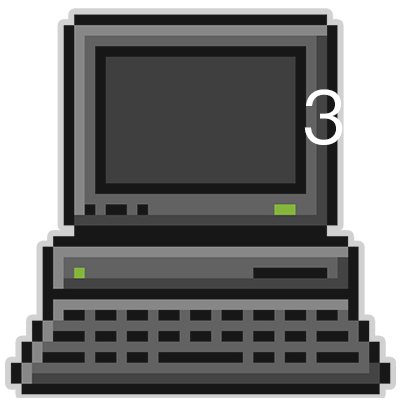
<style>
.page{position:relative;width:400px;height:400px;background:#ffffff}
.page>*{position:absolute;margin:0}
.t1{font:75px "PingFangTC-Regular";color:#ffffff}
</style>
<div class="page">
<p class="t1" style="left:304px;top:89px;width:39px;height:56px">3</p>
</div>
